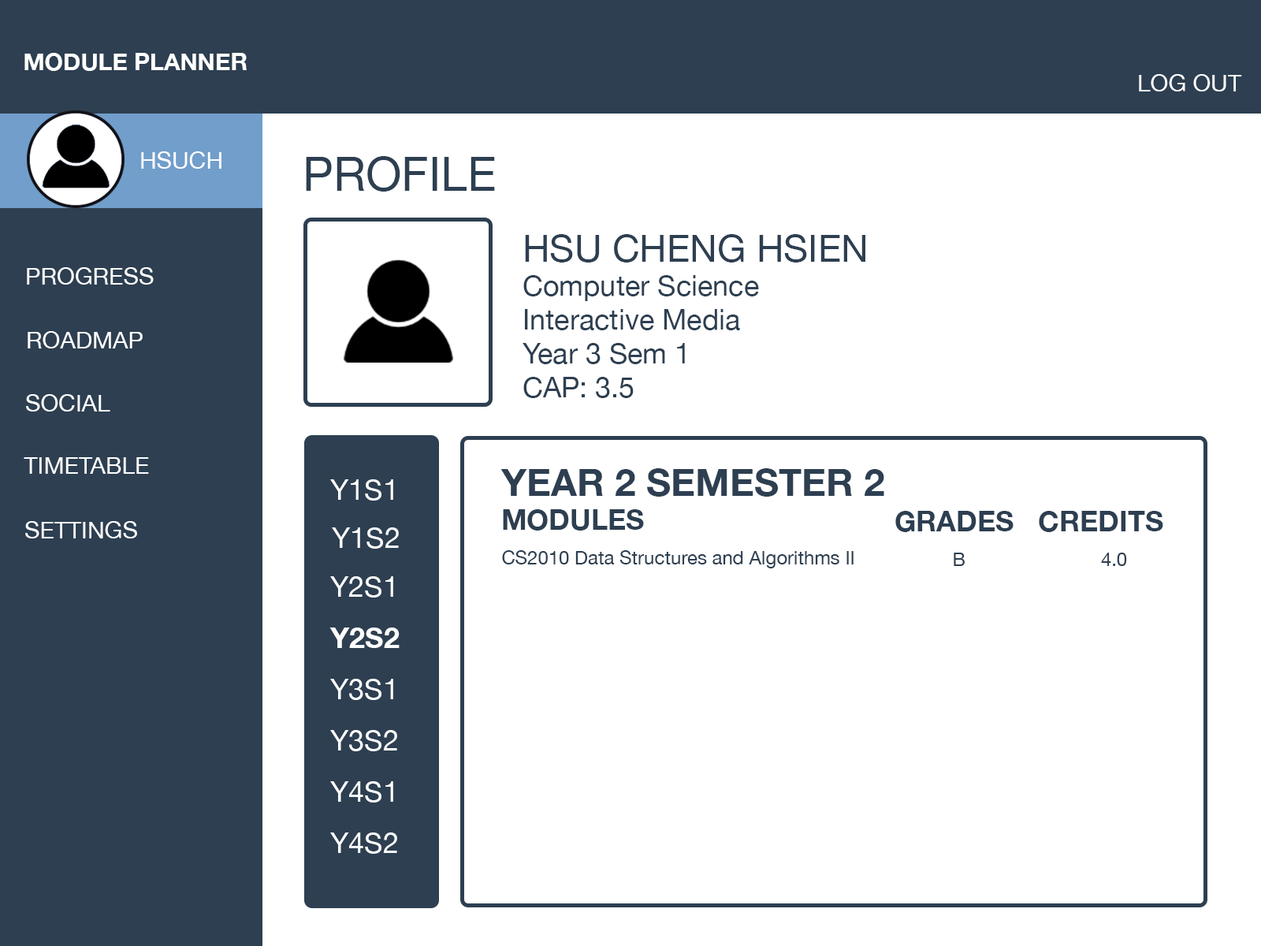
<style>
.page{position:relative;width:1261px;height:946px;background:#ffffff}
.page>*{position:absolute;margin:0}
.t1{font:23.6px "HelveticaNeue-Bold";color:#ffffff}
.t2{font:23.5px "HelveticaNeue";color:#ffffff}
.t3{font:47.3px "HelveticaNeue";color:#2d3f51}
.t4{font:28.4px "HelveticaNeue";color:#2d3f51}
.t5{font:37.8px "HelveticaNeue";color:#2d3f51}
.t6{font:23.6px "HelveticaNeue";color:#ffffff}
.t7{font:37.8px "HelveticaNeue-Bold";color:#2d3f51}
.t8{font:28.4px "HelveticaNeue-Bold";color:#2d3f51}
.t9{font:28.7px "HelveticaNeue";color:#fefefe}
.t10{font:18.9px "HelveticaNeue";color:#2d3f51}
.t11{font:19.1px "HelveticaNeue";color:#2d3f51}
.t12{font:28.7px "HelveticaNeue-Bold";color:#fefefe}
</style>
<div class="page">
<p class="t1" style="left:24px;top:53px;width:223px;height:18px">MODULE PLANNER</p>
<p class="t2" style="left:1139px;top:74px;width:103px;height:17px">LOG OUT</p>
<p class="t2" style="left:141px;top:151px;width:80px;height:18px">HSUCH</p>
<p class="t3" style="left:306px;top:156px;width:189px;height:36px">PROFILE</p>
<p class="t4" style="left:522px;top:234px;width:343px;height:164px;text-align:right"><span class="t5">HSU CHENG HSIEN<br></span>Computer Science<br>Interactive Media<br>Year 3 Sem 1<br>CAP: 3.5</p>
<p class="t6" style="left:27px;top:267px;width:127px;height:17px">PROGRESS</p>
<p class="t6" style="left:28px;top:331px;width:115px;height:17px">ROADMAP</p>
<p class="t6" style="left:26px;top:394px;width:84px;height:17px">SOCIAL</p>
<p class="t6" style="left:24px;top:457px;width:125px;height:17px">TIMETABLE</p>
<p class="t7" style="left:500px;top:468px;width:384px;height:62px;text-align:right">YEAR 2 SEMESTER 2<br><span class="t8">MODULES</span></p>
<p class="t9" style="left:330px;top:479px;width:63px;height:21px">Y1S1</p>
<p class="t6" style="left:25px;top:521px;width:112px;height:17px">SETTINGS</p>
<p class="t8" style="left:895px;top:511px;width:118px;height:21px">GRADES</p>
<p class="t8" style="left:1039px;top:511px;width:124px;height:21px">CREDITS</p>
<p class="t9" style="left:332px;top:527px;width:67px;height:21px">Y1S2</p>
<p class="t10" style="left:502px;top:550px;width:351px;height:18px">CS2010 Data Structures and Algorithms II</p>
<p class="t10" style="left:954px;top:552px;width:11px;height:14px">B</p>
<p class="t11" style="left:1101px;top:552px;width:26px;height:14px">4.0</p>
<p class="t9" style="left:330px;top:576px;width:63px;height:21px">Y2S1</p>
<p class="t12" style="left:329px;top:627px;width:71px;height:21px">Y2S2</p>
<p class="t9" style="left:330px;top:679px;width:63px;height:21px">Y3S1</p>
<p class="t9" style="left:330px;top:730px;width:67px;height:21px">Y3S2</p>
<p class="t9" style="left:330px;top:781px;width:63px;height:21px">Y4S1</p>
<p class="t9" style="left:330px;top:832px;width:67px;height:21px">Y4S2</p>
</div>
